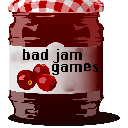
<style>
.page{position:relative;width:128px;height:128px;background:#ffffff}
.page>*{position:absolute;margin:0}
.t1{font:13.6px "ChicagoFLF";color:#000000}
</style>
<div class="page">
<p class="t1" style="left:23px;top:49px;width:59px;height:14px">bad jam</p>
<p class="t1" style="left:52px;top:63px;width:46px;height:12px">games</p>
</div>
